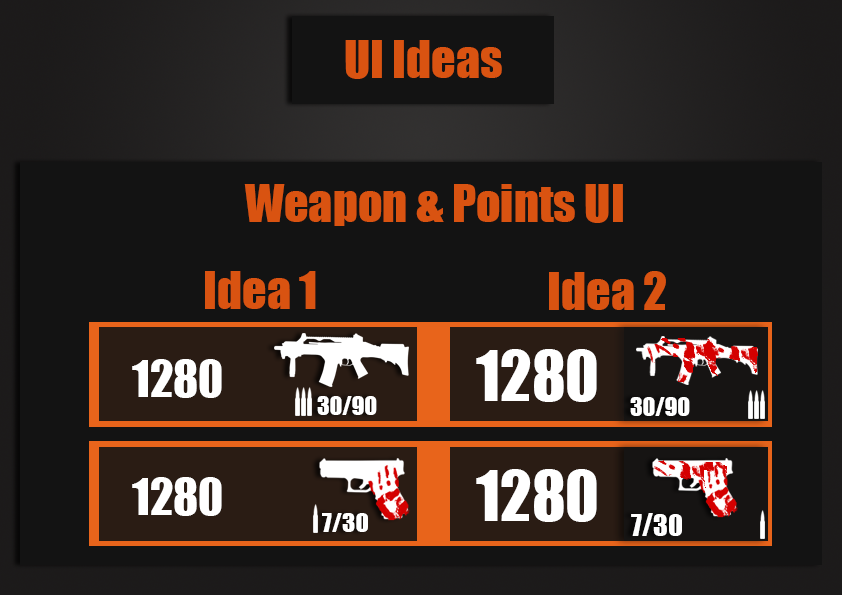
<style>
.page{position:relative;width:842px;height:595px;background:#131313}
.page>*{position:absolute;margin:0}
.t1{font:48px "Impact";color:#d95311}
.t2{font:63.6px "Impact";color:#ffffff}
.t3{font:47.3px "Impact";color:#ffffff}
.t4{font:23.7px "Impact";color:#ffffff}
.t5{font:24.5px "Impact";color:#ffffff;scale:1.04 1}
.t6{font:27.7px "Impact";color:#ffffff}
</style>
<div class="page">
<p class="t1" style="left:345px;top:40px;width:157px;height:39px">UI Ideas</p>
<p class="t1" style="left:244px;top:184px;width:379px;height:42px">Weapon &amp; Points UI</p>
<p class="t1" style="left:205px;top:271px;width:111px;height:38px">Idea 1</p>
<p class="t1" style="left:549px;top:271px;width:117px;height:39px">Idea 2</p>
<p class="t2" style="left:476px;top:349px;width:121px;height:53px">1280</p>
<p class="t3" style="left:132px;top:359px;width:90px;height:39px">1280</p>
<p class="t4" style="left:317px;top:396px;width:60px;height:19px">30/90</p>
<p class="t4" style="left:630px;top:397px;width:60px;height:19px">30/90</p>
<p class="t2" style="left:476px;top:469px;width:121px;height:53px">1280</p>
<p class="t3" style="left:132px;top:477px;width:90px;height:39px">1280</p>
<p class="t5" style="left:322px;top:513px;width:46px;height:19px">7/30</p>
<p class="t6" style="left:631px;top:513px;width:51px;height:23px">7/30</p>
</div>
